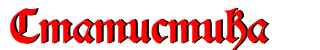
<style>
.page{position:relative;width:320px;height:50px;background:#ffffff}
.page>*{position:absolute;margin:0}
.t1{font:48px "Schwabacher-Regular";color:#ff0101}
</style>
<div class="page">
<p class="t1" style="left:10px;top:7px;width:258px;height:45px">Статистика</p>
</div>
